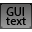
<style>
.page{position:relative;width:32px;height:32px}
.page>*{position:absolute;margin:0}
.t1{font:12px "MyriadPro-Regular";color:#000000}
</style>
<div class="page">
<p class="t1" style="left:6px;top:17px;width:20px;height:8px">text</p>
<p class="t1" style="left:6px;top:7px;width:18px;height:9px">GUI</p>
</div>
